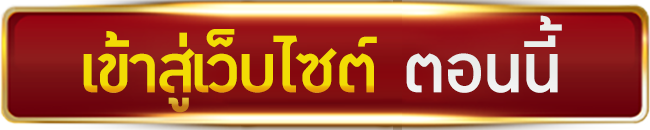
<style>
.page{position:relative;width:650px;height:130px}
.page>*{position:absolute;margin:0}
.t1{font:94.5px "DBOzoneX-Medium";letter-spacing:-0.02em;color:#eceeec}
.t2{font:94.5px "DBOzoneX-Medium";letter-spacing:-0.02em;color:#f2dc04}
</style>
<div class="page">
<p class="t1" style="left:406px;top:15px;width:156px;height:78px">ตอนนี้</p>
<p class="t2" style="left:83px;top:29px;width:294px;height:84px">เข้าสู่เว็บไซต์</p>
</div>
